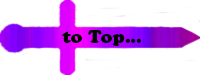
<style>
.page{position:relative;width:200px;height:75px;background:#ffffff}
.page>*{position:absolute;margin:0}
.t1{font:18px "CooperBlackStd";color:#000000}
</style>
<div class="page">
<p class="t1" style="left:62px;top:29px;width:79px;height:17px">...to Top</p>
</div>
